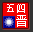
<style>
.page{position:relative;width:33px;height:32px;background:#f20000}
.page>*{position:absolute;margin:0}
.t1{font:10.4px "SimSun";color:#ffffff}
.t2{font:11.7px "SimSun";color:#ffffff}
</style>
<div class="page">
<p class="t1" style="left:7px;top:4px;width:18px;height:9px">五四</p>
<p class="t2" style="left:16px;top:15px;width:11px;height:12px">晋</p>
</div>
